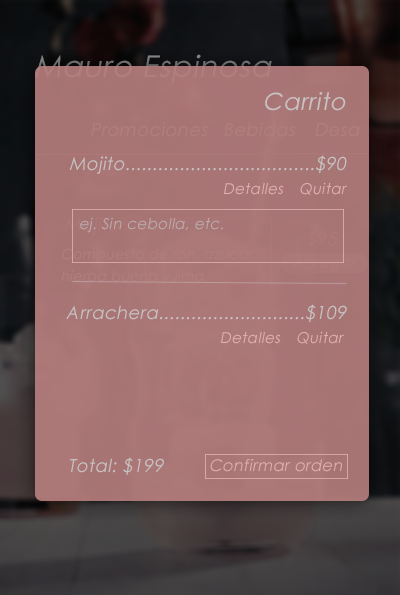
<style>
.page{position:relative;width:400px;height:595px}
.page>*{position:absolute;margin:0}
.t1{font:24px "CenturyGothic";letter-spacing:0.025em;color:#c8c1c1;font-style:italic}
.t2{font:18px "CenturyGothic";letter-spacing:0.025em;color:#b17d7d;font-style:italic}
.t3{font:18px "CenturyGothic";letter-spacing:0.025em;color:#c8c1c1;font-style:italic}
.t4{font:15px "CenturyGothic";letter-spacing:0.025em;color:#e1b1b1;font-style:italic}
.t5{font:15px "CenturyGothic";letter-spacing:0.025em;color:#bcacac;font-style:italic}
.t6{font:18px "CenturyGothic";letter-spacing:0.025em;color:#b47c7c;font-style:italic}
.t7{font:16px "CenturyGothic";letter-spacing:0.025em;color:#e1b1b1;font-style:italic}
</style>
<div class="page">
<p class="t1" style="left:265px;top:92px;width:81px;height:19px">Carrito</p>
<p class="t2" style="left:91px;top:122px;width:117px;height:15px">Promociones</p>
<p class="t2" style="left:224px;top:122px;width:72px;height:15px">Bebidas</p>
<p class="t2" style="left:315px;top:123px;width:45px;height:14px">Desa</p>
<p class="t3" style="left:69px;top:155px;width:278px;height:19px">Mojito...................................$90</p>
<p class="t4" style="left:224px;top:183px;width:60px;height:12px">Detalles</p>
<p class="t4" style="left:300px;top:182px;width:47px;height:13px">Quitar</p>
<p class="t5" style="left:80px;top:217px;width:143px;height:16px">ej. Sin cebolla, etc.</p>
<p class="t6" style="left:306px;top:230px;width:32px;height:18px">$95</p>
<p class="t3" style="left:66px;top:304px;width:281px;height:18px">Arrachera...........................$109</p>
<p class="t4" style="left:221px;top:332px;width:60px;height:12px">Detalles</p>
<p class="t4" style="left:297px;top:331px;width:47px;height:13px">Quitar</p>
<p class="t3" style="left:70px;top:457px;width:94px;height:18px">Total: $199</p>
<p class="t7" style="left:210px;top:459px;width:132px;height:13px">Confirmar orden</p>
</div>
